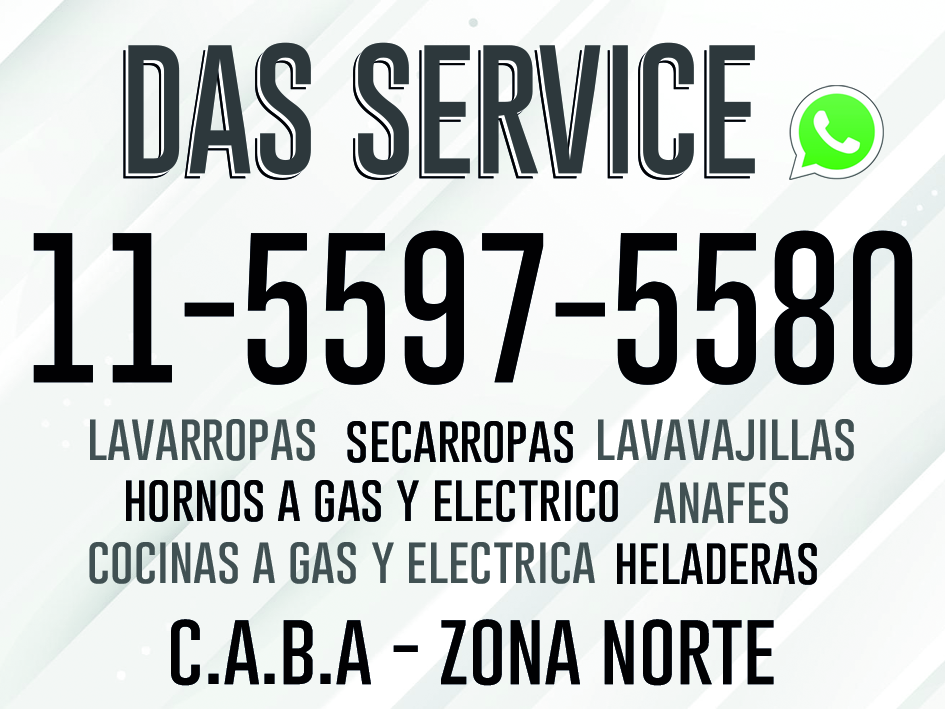
<style>
.page{position:relative;width:945px;height:709px}
.page>*{position:absolute;margin:0}
.t1{font:154.5px "GoboldThin";color:#010102}
.t2{font:48px "GoboldThin";color:#415153}
.t3{font:48px "GoboldThin";color:#010102}
.t4{font:75.4px "GoboldThin";color:#010102}
</style>
<div class="page">
<p class="t1" style="left:33px;top:230px;width:880px;height:155px">11-5597-5580</p>
<p class="t2" style="left:90px;top:419px;width:225px;height:42px">lavarropas</p>
<p class="t3" style="left:347px;top:421px;width:226px;height:42px">secarropas</p>
<p class="t2" style="left:598px;top:419px;width:256px;height:42px">lavavajillas</p>
<p class="t3" style="left:126px;top:480px;width:492px;height:42px">hornos a gas y electrico</p>
<p class="t2" style="left:654px;top:482px;width:134px;height:42px">anafes</p>
<p class="t2" style="left:89px;top:542px;width:506px;height:42px">cocinas a gas y electrica</p>
<p class="t3" style="left:617px;top:543px;width:200px;height:42px">heladeras</p>
<p class="t4" style="left:171px;top:619px;width:603px;height:67px">c.a.b.a - zona norte</p>
</div>
